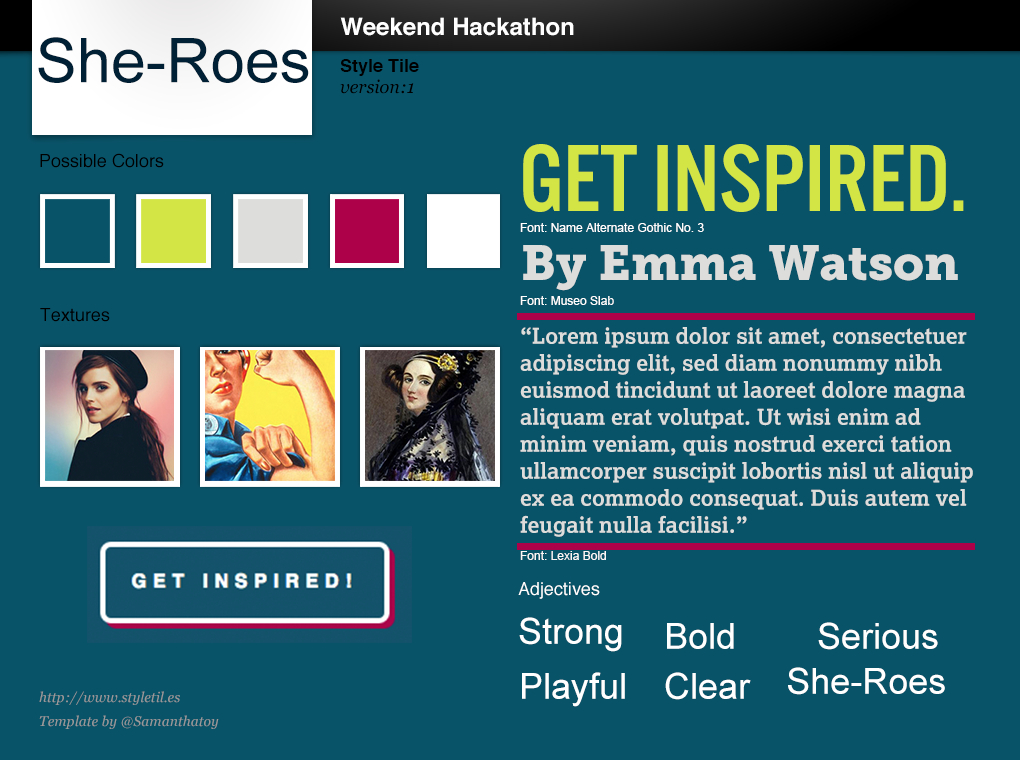
<style>
.page{position:relative;width:1020px;height:760px;background:#095368}
.page>*{position:absolute;margin:0}
.t1{font:24px "Helvetica-Bold";color:#ffffff}
.t2{font:61.8px "ArialMT";color:#002035}
.t3{font:18px "Helvetica-Bold";color:#000000}
.t4{font:18px "Georgia-Italic";color:#000000}
.t5{font:99px "AlternateGotNo3D";color:#d2e544}
.t6{font:18px "Helvetica";color:#000000}
.t7{font:12px "ArialMT";color:#ffffff}
.t8{font:49px "MuseoSlab-900";color:#dddddb}
.t9{font:22px/27px "Lexia-Bold";color:#dddddb}
.t10{font:12px "ArialMT";color:#fcf8f8}
.t11{font:18px "Helvetica";color:#ffffff}
.t12{font:36px "ArialMT";color:#ffffff}
.t13{font:14px/24px "Georgia-Italic";color:#999999}
</style>
<div class="page">
<p class="t1" style="left:340px;top:17px;width:234px;height:19px">Weekend Hackathon</p>
<p class="t2" style="left:38px;top:37px;width:271px;height:46px">She-Roes</p>
<p class="t3" style="left:340px;top:59px;width:79px;height:17px">Style Tile</p>
<p class="t4" style="left:340px;top:79px;width:74px;height:15px">version:1</p>
<p class="t5" style="left:523px;top:144px;width:441px;height:68px">GET INSPIRED.</p>
<p class="t6" style="left:40px;top:153px;width:124px;height:15px">Possible Colors</p>
<p class="t7" style="left:520px;top:223px;width:184px;height:9px">Font: Name Alternate Gothic No. 3</p>
<p class="t8" style="left:523px;top:245px;width:435px;height:46px">By Emma Watson</p>
<p class="t7" style="left:520px;top:296px;width:94px;height:9px">Font: Museo Slab</p>
<p class="t6" style="left:40px;top:308px;width:70px;height:14px">Textures</p>
<p class="t9" style="left:520px;top:327px;width:453px;height:210px">“Lorem ipsum dolor sit amet, consectetuer adipiscing elit, sed diam nonummy nibh euismod tincidunt ut laoreet dolore magna aliquam erat volutpat. Ut wisi enim ad minim veniam, quis nostrud exerci tation ullamcorper suscipit lobortis nisl ut aliquip ex ea commodo consequat. Duis autem vel feugait nulla facilisi.”</p>
<p class="t10" style="left:520px;top:551px;width:86px;height:9px">Font: Lexia Bold</p>
<p class="t11" style="left:518px;top:582px;width:82px;height:17px">Adjectives</p>
<p class="t12" style="left:519px;top:617px;width:103px;height:35px">Strong</p>
<p class="t12" style="left:667px;top:623px;width:67px;height:26px">Bold</p>
<p class="t12" style="left:818px;top:622px;width:120px;height:28px">Serious</p>
<p class="t12" style="left:522px;top:672px;width:103px;height:35px">Playful</p>
<p class="t12" style="left:665px;top:672px;width:86px;height:28px">Clear</p>
<p class="t12" style="left:788px;top:667px;width:157px;height:28px">She-Roes</p>
<p class="t13" style="left:39px;top:691px;width:180px;height:38px">http://www.styletil.es<br>Template by @Samanthatoy</p>
</div>
